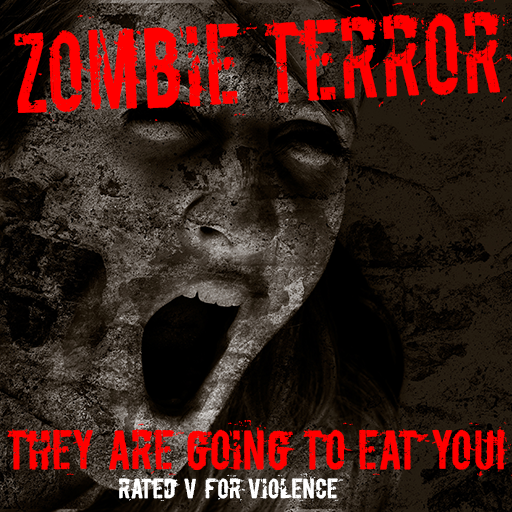
<style>
.page{position:relative;width:512px;height:512px}
.page>*{position:absolute;margin:0}
.t1{font:46.1px "Boycott";color:#ff0000;scale:0.93 1}
.t2{font:23.1px "Boycott";color:#ffffff}
</style>
<div class="page">
<p class="t1" style="left:7px;top:420px;width:507px;height:57px">they are going to eat you!</p>
<p class="t2" style="left:119px;top:473px;width:225px;height:29px">RATED ‘V’ FOR VIOLENCE</p>
</div>
